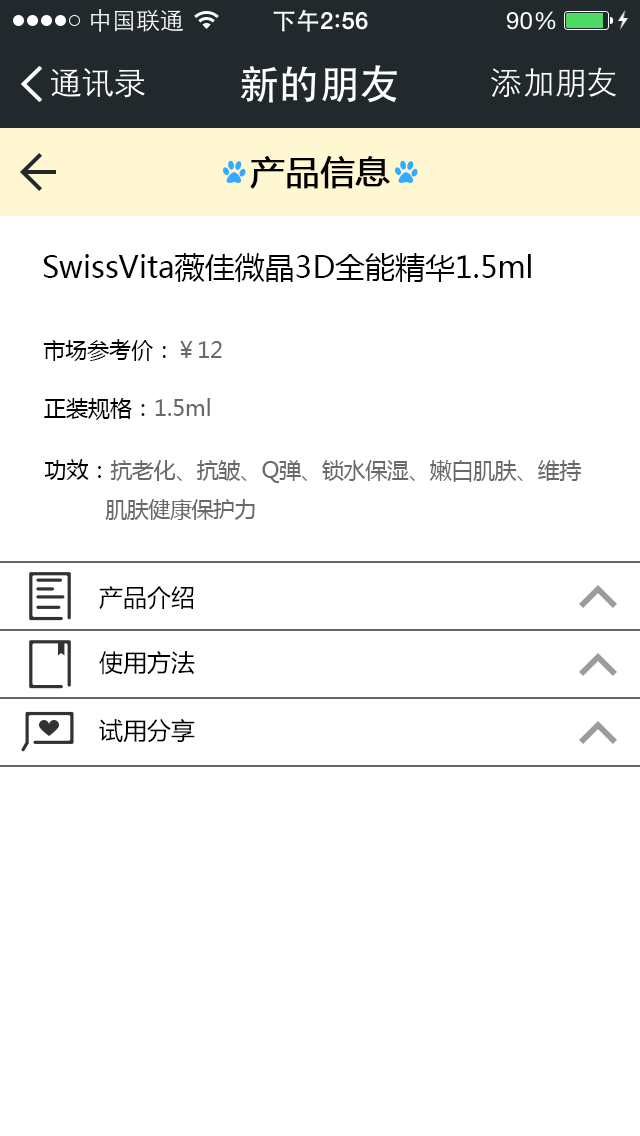
<style>
.page{position:relative;width:640px;height:1136px;background:#ffffff}
.page>*{position:absolute;margin:0}
.t1{font:34px "MicrosoftYaHei";color:#000000;font-weight:bold}
.t2{font:30px "MicrosoftYaHei";color:#010101}
.t3{font:22px "MicrosoftYaHei";color:#000000}
.t4{font:22px "MicrosoftYaHei";color:#696969}
.t5{font:22px "MicrosoftYaHei";letter-spacing:-0.02em;color:#696969}
.t6{font:24px "MicrosoftYaHei";color:#000000}
</style>
<div class="page">
<p class="t1" style="left:250px;top:156px;width:140px;height:33px">产品信息</p>
<p class="t2" style="left:43px;top:253px;width:488px;height:29px">SwissVita薇佳微晶3D全能精华1.5ml</p>
<p class="t3" style="left:43px;top:339px;width:179px;height:22px">市场参考价：<span class="t4">￥12</span></p>
<p class="t3" style="left:44px;top:398px;width:166px;height:22px">正装规格：<span class="t4">1.5ml</span></p>
<p class="t5" style="left:44px;top:459px;width:538px;height:62px"><span class="t3">功效：</span>抗老化、抗皱、Q弹、锁水保湿、嫩白肌肤、维持<br>          肌肤健康保护力</p>
<p class="t6" style="left:99px;top:586px;width:95px;height:24px">产品介绍</p>
<p class="t6" style="left:99px;top:651px;width:96px;height:24px">使用方法</p>
<p class="t6" style="left:99px;top:718px;width:96px;height:25px">试用分享</p>
</div>
